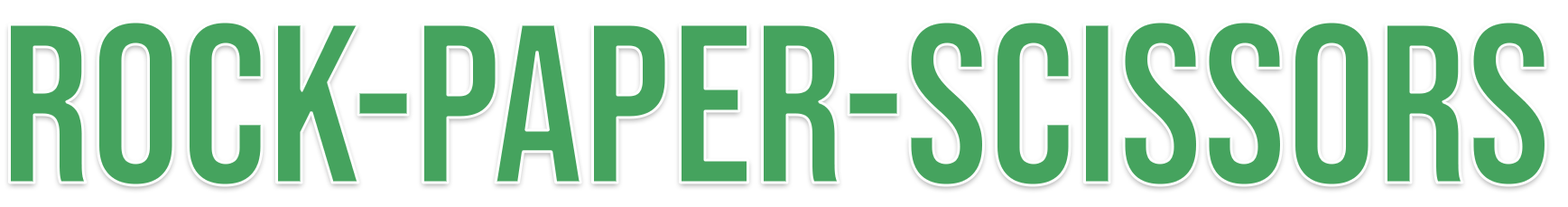
<style>
.page{position:relative;width:1568px;height:207px;background:#ffffff}
.page>*{position:absolute;margin:0}
.t1{font:225.7px "BebasNeue-Regular";color:#45a35e}
</style>
<div class="page">
<p class="t1" style="left:9px;top:22px;width:1537px;height:163px">Rock-Paper-Scissors</p>
</div>
